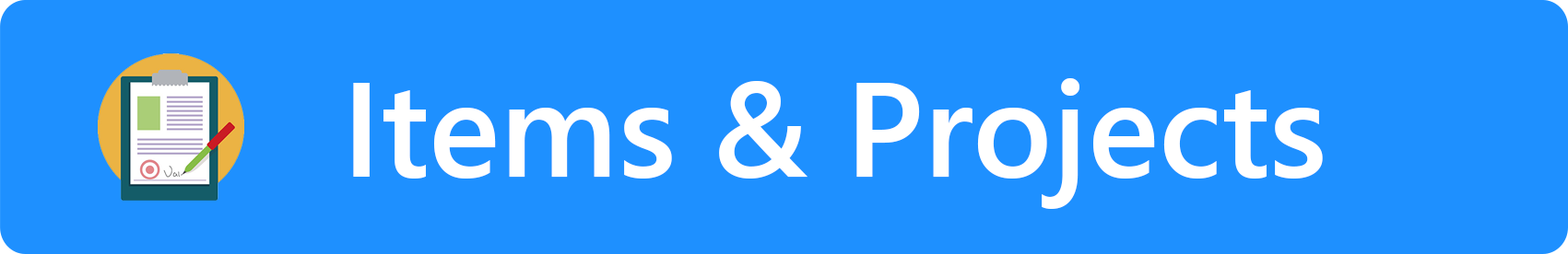
<style>
.page{position:relative;width:1568px;height:254px;background:#1e90ff}
.page>*{position:absolute;margin:0}
.t1{font:133.7px "SegoeUI-Semibold";color:#ffffff}
</style>
<div class="page">
<p class="t1" style="left:353px;top:78px;width:970px;height:131px">Items &amp; Projects</p>
</div>
